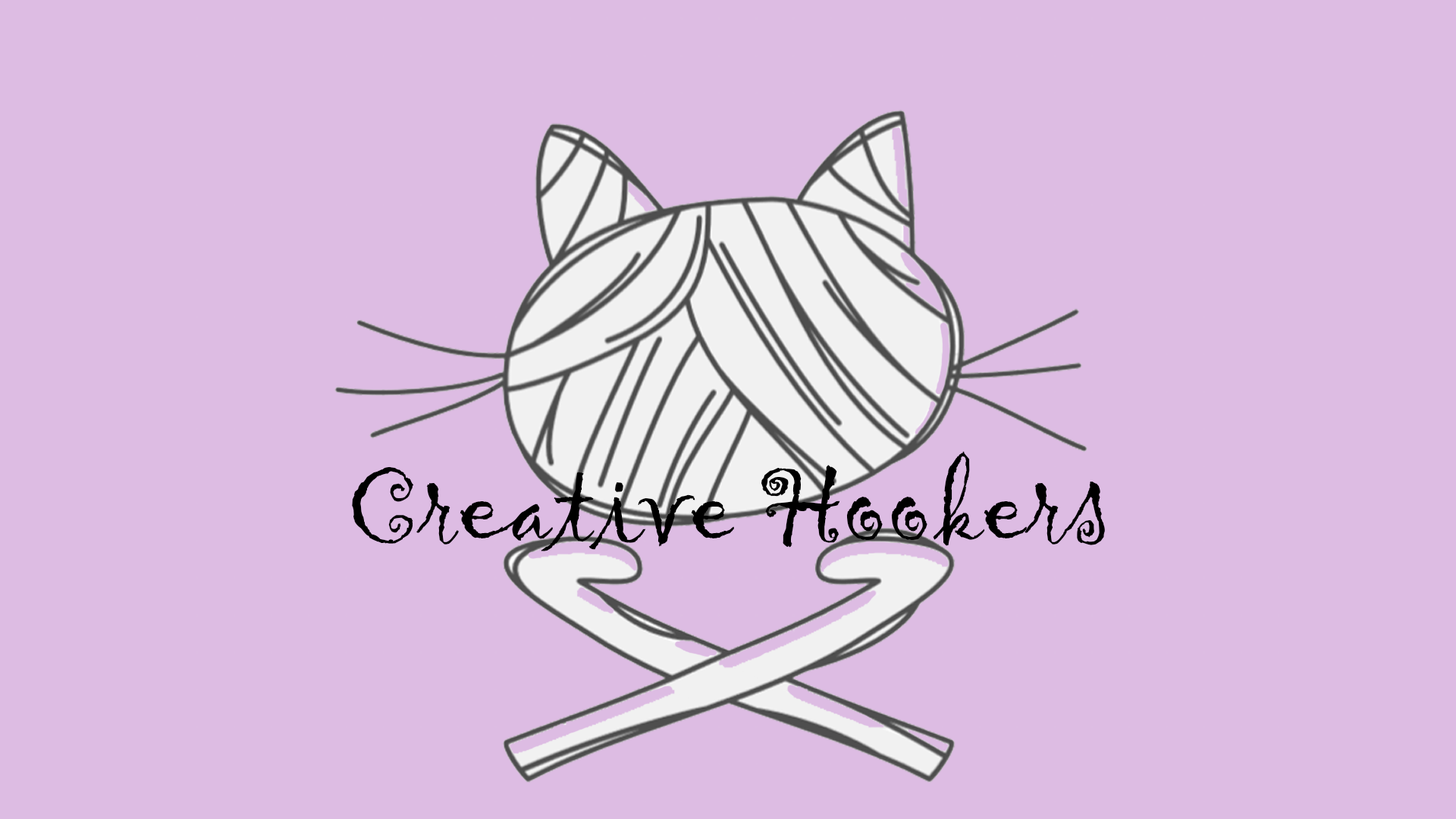
<style>
.page{position:relative;width:1456px;height:819px;background:#ddbce3}
.page>*{position:absolute;margin:0}
.t1{font:113.8px "Gigi-Regular";color:#000000}
</style>
<div class="page">
<p class="t1" style="left:352px;top:451px;width:753px;height:100px">Creative Hookers</p>
</div>
